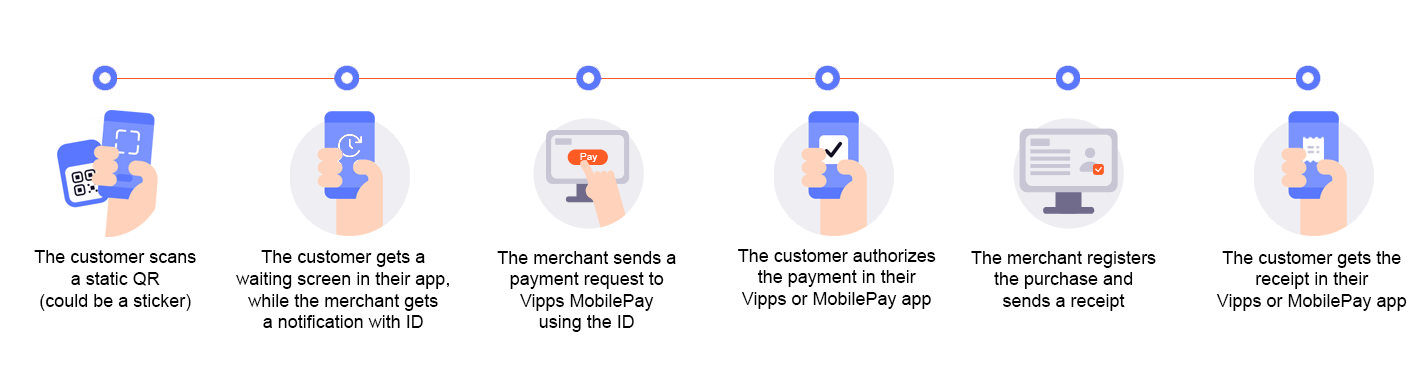
<style>
.page{position:relative;width:1428px;height:378px;background:#ffffff}
.page>*{position:absolute;margin:0}
.t1{font:18px "ArialMT";color:#000000}
</style>
<div class="page">
<p class="t1" style="left:34px;top:250px;width:162px;height:61px;text-align:center">The customer scans<br>a static QR<br>(could be a sticker)</p>
<p class="t1" style="left:236px;top:250px;width:213px;height:78px;text-align:center">The customer gets a<br>waiting screen in their app,<br>while the merchant gets<br>a notification with ID</p>
<p class="t1" style="left:497px;top:251px;width:179px;height:81px;text-align:center">The merchant sends a<br>payment request to<br>Vipps MobilePay<br>using the ID</p>
<p class="t1" style="left:738px;top:249px;width:198px;height:60px;text-align:center">The customer authorizes<br>the payment in their<br>Vipps or MobilePay app</p>
<p class="t1" style="left:971px;top:251px;width:185px;height:60px;text-align:center">The merchant registers<br>the purchase and<br>sends a receipt</p>
<p class="t1" style="left:1216px;top:251px;width:191px;height:60px;text-align:center">The customer gets the<br>receipt in their<br>Vipps or MobilePay app</p>
</div>
